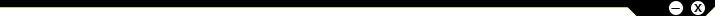
<style>
.page{position:relative;width:715px;height:20px;background:#ffffff}
.page>*{position:absolute;margin:0}
.t1{font:16px "SukhumvitSet-Bold";color:#000000}
.t2{font:16px "SinhalaSangamMN";color:#000000}
</style>
<div class="page">
<p class="t1" style="left:694px;top:4px;width:8px;height:8px">x</p>
<p class="t2" style="left:671px;top:8px;width:9px;height:1px">_</p>
</div>
